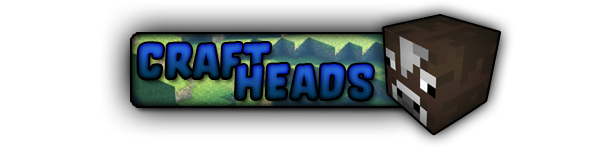
<style>
.page{position:relative;width:615px;height:148px;background:#ffffff}
.page>*{position:absolute;margin:0}
.t1{font:48px "Orgovan-Rounded"}
</style>
<div class="page">
<p class="t1" style="left:138px;top:43px;width:133px;height:36px">Craft</p>
<p class="t1" style="left:235px;top:64px;width:138px;height:36px">Heads</p>
</div>
